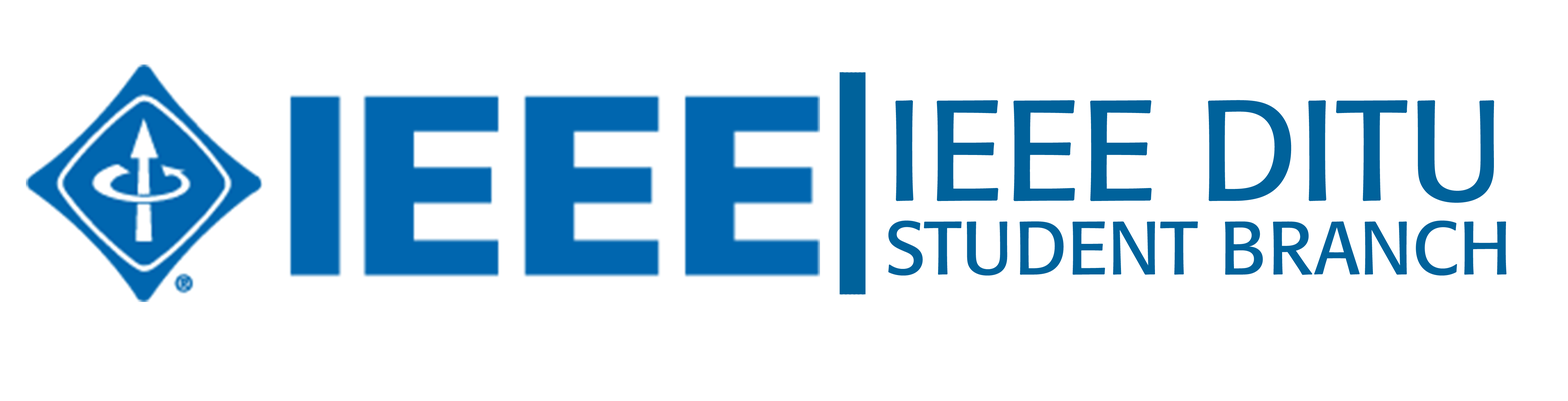
<style>
.page{position:relative;width:1568px;height:401px;background:#ffffff}
.page>*{position:absolute;margin:0}
.t1{font:141.5px "Formata-Regular";color:#00629b}
.t2{font:74.6px "Formata-Regular";color:#00629b}
</style>
<div class="page">
<p class="t1" style="left:895px;top:100px;width:599px;height:103px">IEEE DITU</p>
<p class="t2" style="left:888px;top:220px;width:619px;height:56px">STUDENT BRANCH</p>
</div>
